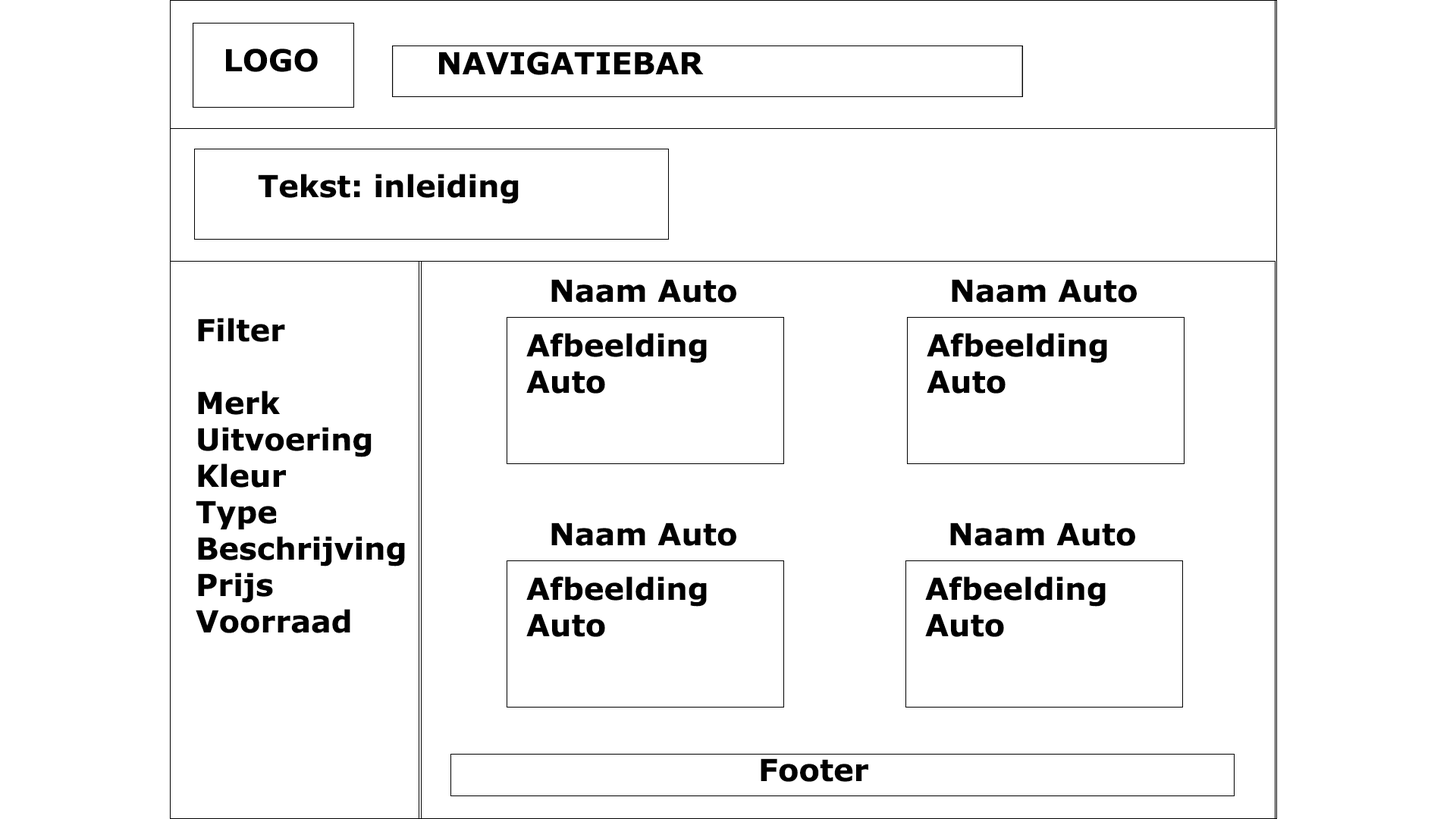
<style>
.page{position:relative;width:1456px;height:819px;background:#ffffff}
.page>*{position:absolute;margin:0}
.t1{font:30.3px "Verdana-Bold";color:#000000}
</style>
<div class="page">
<p class="t1" style="left:226px;top:49px;width:92px;height:23px">LOGO</p>
<p class="t1" style="left:439px;top:52px;width:265px;height:23px">NAVIGATIEBAR</p>
<p class="t1" style="left:258px;top:174px;width:261px;height:30px">Tekst: inleiding</p>
<p class="t1" style="left:551px;top:279px;width:185px;height:24px">Naam Auto</p>
<p class="t1" style="left:952px;top:279px;width:185px;height:24px">Naam Auto</p>
<p class="t1" style="left:196px;top:318px;width:209px;height:315px">Filter<br><br>Merk<br>Uitvoering<br>Kleur<br>Type<br>Beschrijving<br>Prijs<br>Voorraad</p>
<p class="t1" style="left:526px;top:333px;width:181px;height:61px">Afbeelding <br>Auto</p>
<p class="t1" style="left:927px;top:333px;width:180px;height:61px">Afbeelding <br>Auto</p>
<p class="t1" style="left:551px;top:522px;width:185px;height:24px">Naam Auto</p>
<p class="t1" style="left:950px;top:522px;width:185px;height:24px">Naam Auto</p>
<p class="t1" style="left:526px;top:576px;width:181px;height:61px">Afbeelding <br>Auto</p>
<p class="t1" style="left:925px;top:576px;width:181px;height:61px">Afbeelding <br>Auto</p>
<p class="t1" style="left:761px;top:758px;width:107px;height:24px">Footer</p>
</div>
